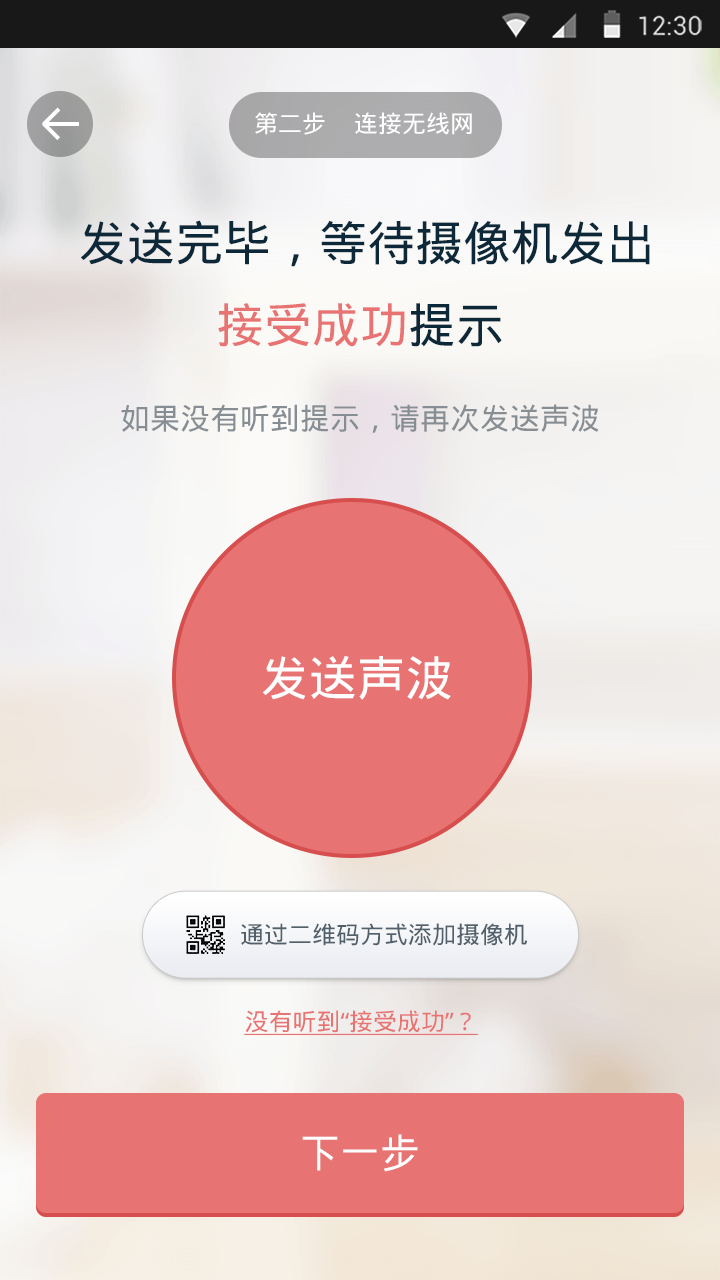
<style>
.page{position:relative;width:720px;height:1280px}
.page>*{position:absolute;margin:0}
.t1{font:24px "DroidSansFallback";color:#ffffff}
.t2{font:48px "DroidSansFallback";color:#0c2839}
.t3{font:48px "DroidSansFallback";color:#e87373}
.t4{font:30px "DroidSansFallback";color:#878e93}
.t5{font:48px "DroidSansFallback";color:#ffffff}
.t6{font:24px "DroidSansFallback";color:#51606a}
.t7{font:24px "DroidSansFallback";color:#e87373;text-decoration:underline}
.t8{font:40px "DroidSansFallback";color:#ffffff}
</style>
<div class="page">
<p class="t1" style="left:255px;top:112px;width:70px;height:23px">第二步</p>
<p class="t1" style="left:355px;top:112px;width:117px;height:23px">连接无线网</p>
<p class="t2" style="left:80px;top:220px;width:570px;height:47px">发送完毕，等待摄像机发出</p>
<p class="t3" style="left:218px;top:303px;width:284px;height:44px">接受成功<span class="t2">提示</span></p>
<p class="t4" style="left:121px;top:404px;width:478px;height:29px">如果没有听到提示，请再次发送声波</p>
<p class="t5" style="left:262px;top:655px;width:189px;height:45px">发送声波</p>
<p class="t6" style="left:241px;top:923px;width:286px;height:23px">通过二维码方式添加摄像机</p>
<p class="t7" style="left:244px;top:1010px;width:234px;height:26px">没有听到“接受成功”？</p>
<p class="t8" style="left:302px;top:1134px;width:116px;height:38px">下一步</p>
</div>
